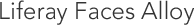
<style>
.page{position:relative;width:194px;height:25px;background:#ffffff}
.page>*{position:absolute;margin:0}
.t1{font:24px "Avenir-Light";color:#333333}
</style>
<div class="page">
<p class="t1" style="left:0px;top:0px;width:194px;height:25px">Liferay Faces Alloy</p>
</div>
